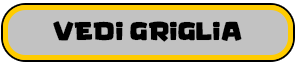
<style>
.page{position:relative;width:300px;height:65px;background:#c2c2c2}
.page>*{position:absolute;margin:0}
.t1{font:25.5px "KidGames";color:#000000}
</style>
<div class="page">
<p class="t1" style="left:53px;top:21px;width:189px;height:21px">VEDI GRIGLIA</p>
</div>
